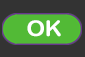
<style>
.page{position:relative;width:85px;height:57px;background:#333333}
.page>*{position:absolute;margin:0}
.t1{font:21.4px "ArialRoundedMTBold";color:#ffffff;scale:1.09 1}
</style>
<div class="page">
<p class="t1" style="left:27px;top:20px;width:34px;height:17px">OK</p>
</div>
